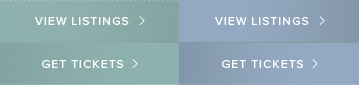
<style>
.page{position:relative;width:359px;height:85px}
.page>*{position:absolute;margin:0}
.t1{font:12px "ProximaNova-Regular";letter-spacing:0.07em;color:#ffffff}
</style>
<div class="page">
<p class="t1" style="left:215px;top:17px;width:94px;height:8px">VIEW LISTINGS</p>
<p class="t1" style="left:222px;top:60px;width:81px;height:8px">GET TICKETS</p>
</div>
